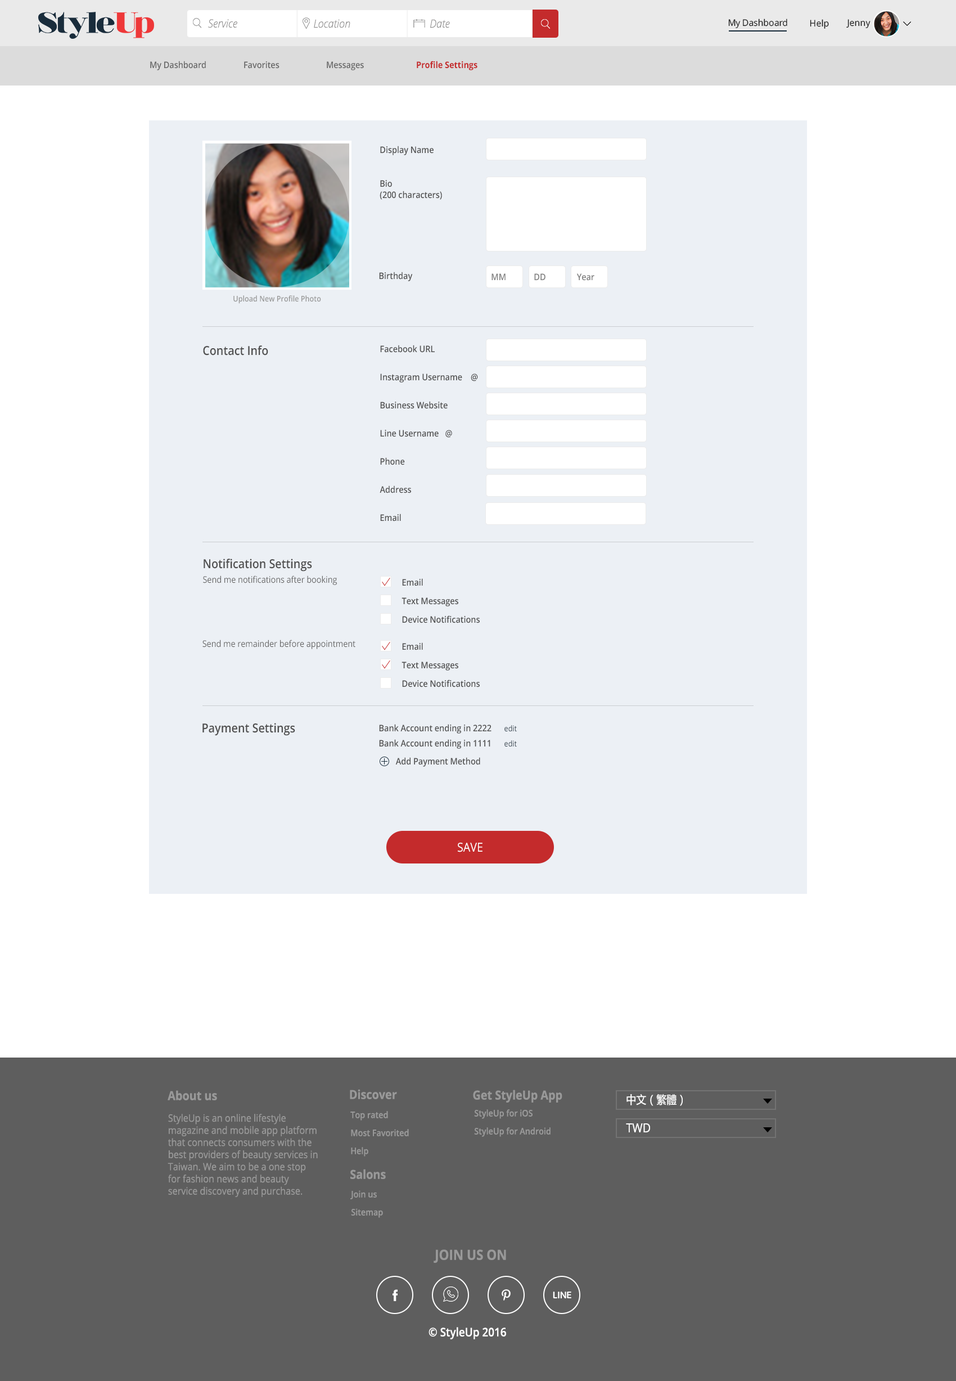
<style>
.page{position:relative;width:956px;height:1381px;background:#ffffff}
.page>*{position:absolute;margin:0}
.t1{font:11.2px "OpenSansLight-Italic";color:#919090;scale:0.91 1}
.t2{font:9px "OpenSans";letter-spacing:-0.015em;color:#1a1a1a}
.t3{font:9px "OpenSans";color:#1a1a1a}
.t4{font:9px "OpenSans-Semibold";color:#666666;scale:0.9 1}
.t5{font:9px "OpenSans-Bold";color:#c42b2c;scale:0.9 1}
.t6{font:9px "OpenSans-Semibold";color:#505050;scale:0.9 1}
.t7{font:9px/11.3px "OpenSans-Semibold";color:#505050;scale:0.9 1}
.t8{font:7.9px "OpenSans-Semibold";color:#999999;scale:0.9 1}
.t9{font:12.4px "OpenSans-Semibold";color:#505050;scale:0.9 1}
.t10{font:9px/14.1px "OpenSans-Semibold";color:#505050;scale:0.9 1}
.t11{font:9px "OpenSans";color:#666666;scale:0.9 1}
.t12{font:7.9px "OpenSans";color:#192c3b;scale:0.9 1}
.t13{font:12.4px "OpenSans";color:#ffffff;scale:0.89 1}
.t14{font:12.4px "OpenSans-Bold";color:#999999;scale:0.9 1}
.t15{font:11.2px "MicrosoftYaHei-Regular";color:#ffffff;scale:0.9 1}
.t16{font:9px/18px "OpenSans-Semibold";color:#999999;scale:0.9 1}
.t17{font:10.1px "OpenSans";color:#999999;scale:0.9 1}
.t18{font:12.4px "OpenSans";color:#ffffff;scale:0.9 1}
.t19{font:14.1px "OpenSans-Bold";color:#999999;scale:0.9 1}
.t20{font:11.8px "OpenSans-Semibold";color:#ffffff;scale:0.9 1}
</style>
<div class="page">
<p class="t1" style="left:208px;top:19px;width:29px;height:9px">Service</p>
<p class="t1" style="left:314px;top:19px;width:36px;height:9px">Location</p>
<p class="t1" style="left:430px;top:19px;width:20px;height:9px">Date</p>
<p class="t2" style="left:728px;top:19px;width:60px;height:9px">My Dashboard</p>
<p class="t3" style="left:810px;top:19px;width:19px;height:10px">Help</p>
<p class="t3" style="left:847px;top:19px;width:24px;height:9px">Jenny</p>
<p class="t4" style="left:150px;top:61px;width:56px;height:9px">My Dashboard</p>
<p class="t4" style="left:244px;top:61px;width:36px;height:8px">Favorites</p>
<p class="t4" style="left:327px;top:61px;width:37px;height:9px">Messages</p>
<p class="t5" style="left:417px;top:61px;width:61px;height:9px">Profile Settings</p>
<p class="t6" style="left:380px;top:146px;width:54px;height:9px">Display Name</p>
<p class="t7" style="left:380px;top:180px;width:62px;height:20px">Bio<br>(200 characters)</p>
<p class="t6" style="left:379px;top:272px;width:34px;height:9px">Birthday</p>
<p class="t4" style="left:492px;top:273px;width:14px;height:7px;opacity:0.88">MM</p>
<p class="t4" style="left:534px;top:273px;width:12px;height:7px;opacity:0.88">DD</p>
<p class="t4" style="left:577px;top:273px;width:18px;height:8px;opacity:0.88">Year</p>
<p class="t8" style="left:233px;top:295px;width:88px;height:9px">Upload New Profile Photo</p>
<p class="t9" style="left:203px;top:345px;width:65px;height:11px">Contact Info</p>
<p class="t10" style="left:380px;top:345px;width:98px;height:176px">Facebook URL<br><br>Instagram Username    @<br><br>Business Website<br><br>Line Username   @<br><br>Phone<br><br>Address<br><br>Email</p>
<p class="t9" style="left:204px;top:559px;width:108px;height:13px">Notification Settings</p>
<p class="t11" style="left:203px;top:575px;width:134px;height:10px">Send me notifications after booking</p>
<p class="t6" style="left:402px;top:578px;width:21px;height:8px">Email</p>
<p class="t6" style="left:402px;top:597px;width:56px;height:9px">Text Messages</p>
<p class="t6" style="left:402px;top:615px;width:78px;height:8px">Device Notifications</p>
<p class="t11" style="left:202px;top:640px;width:154px;height:9px">Send me remainder before appointment</p>
<p class="t6" style="left:402px;top:642px;width:21px;height:8px">Email</p>
<p class="t6" style="left:402px;top:662px;width:56px;height:8px">Text Messages</p>
<p class="t6" style="left:402px;top:680px;width:78px;height:7px">Device Notifications</p>
<p class="t9" style="left:202px;top:723px;width:93px;height:13px">Payment Settings</p>
<p class="t6" style="left:379px;top:724px;width:113px;height:10px">Bank Account ending in 2222</p>
<p class="t12" style="left:505px;top:725px;width:12px;height:7px">edit</p>
<p class="t6" style="left:379px;top:739px;width:111px;height:10px">Bank Account ending in 1111</p>
<p class="t12" style="left:505px;top:740px;width:12px;height:7px">edit</p>
<p class="t6" style="left:395px;top:757px;width:85px;height:10px">Add Payment Method</p>
<p class="t13" style="left:458px;top:843px;width:25px;height:9px">SAVE</p>
<p class="t14" style="left:168px;top:1090px;width:49px;height:10px">About us</p>
<p class="t14" style="left:350px;top:1089px;width:47px;height:10px">Discover</p>
<p class="t14" style="left:473px;top:1090px;width:89px;height:12px">Get StyleUp App</p>
<p class="t15" style="left:627px;top:1094px;width:56px;height:12px">中文（繁體）</p>
<p class="t16" style="left:474px;top:1109px;width:77px;height:28px;text-align:right">StyleUp for iOS<br>StyleUp for Android</p>
<p class="t17" style="left:168px;top:1114px;width:150px;height:83px;text-align:right">StyleUp is an online lifestyle magazine and mobile app platform that connects consumers with the best providers of beauty services in Taiwan. We aim to be a one stop for fashion news and beauty service discovery and purchase.</p>
<p class="t16" style="left:350px;top:1111px;width:59px;height:45px;text-align:right">Top rated<br>Most Favorited<br>Help</p>
<p class="t18" style="left:626px;top:1123px;width:24px;height:9px">TWD</p>
<p class="t14" style="left:350px;top:1169px;width:36px;height:10px">Salons</p>
<p class="t16" style="left:350px;top:1190px;width:33px;height:28px;text-align:right">Join us<br>Sitemap</p>
<p class="t19" style="left:434px;top:1249px;width:72px;height:14px">JOIN US ON</p>
<p class="t20" style="left:429px;top:1327px;width:77px;height:12px">© StyleUp 2016</p>
</div>
